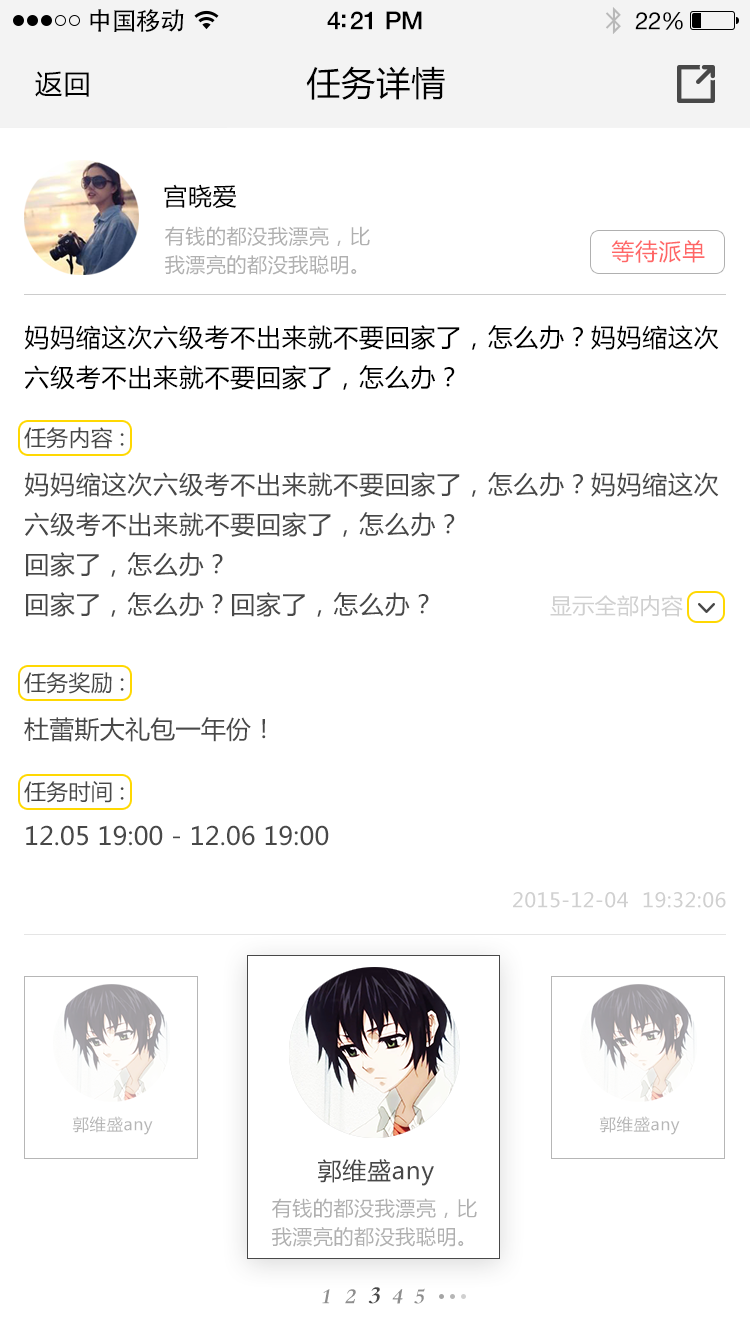
<style>
.page{position:relative;width:750px;height:1334px;background:#ffffff}
.page>*{position:absolute;margin:0}
.t1{font:25px "AdobeHeitiStd-Regular";letter-spacing:-0.025em;color:#000000}
.t2{font:25px "HelveticaNeue-Medium";letter-spacing:-0.02em;color:#000000}
.t3{font:24px "HelveticaNeue";letter-spacing:-0.02em;color:#000000}
.t4{font:27px "MicrosoftYaHei";letter-spacing:0.05em;color:#000000}
.t5{font:34px "MicrosoftYaHei";letter-spacing:0.03em;color:#000000}
.t6{font:24px "MicrosoftYaHei";letter-spacing:0.03em;color:#000000}
.t7{font:20px/70px "MicrosoftYaHei";letter-spacing:0.03em;color:#b0b0b0}
.t8{font:23px "MicrosoftYaHei";letter-spacing:0.03em;color:#ff6666}
.t9{font:25px/70px "MicrosoftYaHei";letter-spacing:0.03em;color:#000000}
.t10{font:22px "MicrosoftYaHei";letter-spacing:0.01em;color:#555555}
.t11{font:25px/70px "MicrosoftYaHei";letter-spacing:0.03em;color:#484848}
.t12{font:22px "MicrosoftYaHei";letter-spacing:0.01em;color:#d0d0d0}
.t13{font:25px "MicrosoftYaHei";letter-spacing:0.01em;color:#484848}
.t14{font:25px "MicrosoftYaHei";letter-spacing:0.01em;color:#555555}
.t15{font:20px "MicrosoftYaHei";letter-spacing:0.03em;color:#d0d0d0}
.t16{font:24px "MicrosoftYaHei";letter-spacing:0.03em;color:#484848}
.t17{font:22px "STSongti-SC-Black";letter-spacing:0.01em;color:#8e8e8e;font-style:italic}
.t18{font:25px "STSongti-SC-Black";letter-spacing:0.01em;color:#555555;font-style:italic}
</style>
<div class="page">
<p class="t1" style="left:90px;top:9px;width:94px;height:23px">中国移动</p>
<p class="t2" style="left:327px;top:11px;width:95px;height:19px">4:21 PM</p>
<p class="t3" style="left:635px;top:12px;width:48px;height:18px">22%</p>
<p class="t4" style="left:35px;top:71px;width:54px;height:26px">返回</p>
<p class="t5" style="left:306px;top:66px;width:139px;height:34px">任务详情</p>
<p class="t6" style="left:164px;top:184px;width:73px;height:24px">宫晓爱</p>
<p class="t7" style="left:165px;top:226px;width:205px;height:49px">有钱的都没我漂亮，比<br>我漂亮的都没我聪明。</p>
<p class="t8" style="left:611px;top:240px;width:94px;height:23px">等待派单</p>
<p class="t9" style="left:24px;top:325px;width:695px;height:65px">妈妈缩这次六级考不出来就不要回家了，怎么办？妈妈缩这次<br>六级考不出来就不要回家了，怎么办？</p>
<p class="t10" style="left:24px;top:427px;width:100px;height:22px">任务内容 :</p>
<p class="t11" style="left:24px;top:472px;width:695px;height:145px">妈妈缩这次六级考不出来就不要回家了，怎么办？妈妈缩这次<br>六级考不出来就不要回家了，怎么办？<br>回家了，怎么办？<br>回家了，怎么办？回家了，怎么办？</p>
<p class="t12" style="left:550px;top:595px;width:133px;height:22px">显示全部内容</p>
<p class="t10" style="left:24px;top:672px;width:100px;height:22px">任务奖励 :</p>
<p class="t13" style="left:24px;top:717px;width:242px;height:25px">杜蕾斯大礼包一年份！</p>
<p class="t10" style="left:24px;top:781px;width:100px;height:22px">任务时间 :</p>
<p class="t14" style="left:26px;top:825px;width:303px;height:21px">12.05 19:00 - 12.06 19:00</p>
<p class="t15" style="left:513px;top:892px;width:213px;height:16px">2015-12-04  19:32:06</p>
<p class="t16" style="left:318px;top:1159px;width:116px;height:27px">郭维盛any</p>
<p class="t7" style="left:272px;top:1198px;width:205px;height:49px">有钱的都没我漂亮，比<br>我漂亮的都没我聪明。</p>
<p class="t17" style="left:322px;top:1289px;width:8px;height:15px">1</p>
<p class="t17" style="left:345px;top:1289px;width:11px;height:15px">2</p>
<p class="t18" style="left:368px;top:1287px;width:12px;height:17px">3</p>
<p class="t17" style="left:392px;top:1289px;width:11px;height:15px">4</p>
<p class="t17" style="left:414px;top:1288px;width:11px;height:16px">5</p>
</div>
